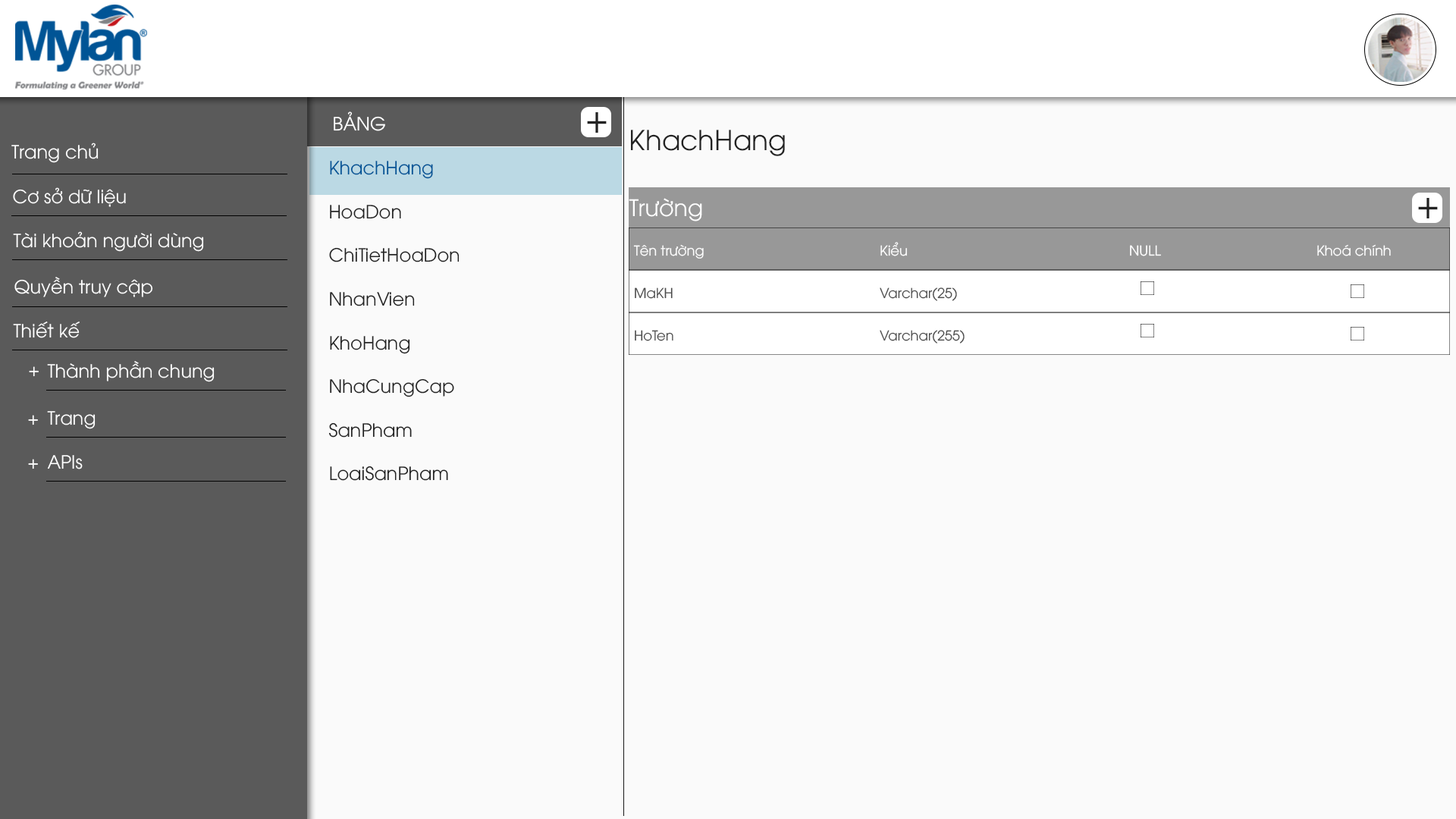
<style>
.page{position:relative;width:1456px;height:819px;background:#fafafa}
.page>*{position:absolute;margin:0}
.t1{font:18.2px "UTM-Avo";color:#ffffff}
.t2{font:40.3px "UTM-Avo";color:#232323;scale:0.93 1}
.t3{font:27.3px "UTM-Avo";color:#232323}
.t4{font:18.2px "UTM-Avo";color:#222222}
.t5{font:18.2px "UTM-Avo";color:#005496}
.t6{font:22.7px "UTM-Avo";color:#ffffff}
.t7{font:13.6px "UTM-Avo";color:#fefefe}
.t8{font:13.6px "UTM-Avo";color:#4b4b4b}
</style>
<div class="page">
<p class="t1" style="left:334px;top:111px;width:51px;height:20px">BẢNG</p>
<p class="t2" style="left:587px;top:112px;width:20px;height:21px">+</p>
<p class="t3" style="left:631px;top:130px;width:154px;height:26px">KhachHang</p>
<p class="t4" style="left:328px;top:161px;width:132px;height:320px"><span class="t5">KhachHang<br></span><br>HoaDon<br><br>ChiTietHoaDon<br><br>NhanVien<br><br>KhoHang<br><br>NhaCungCap<br><br>SanPham<br><br>LoaiSanPham</p>
<p class="t6" style="left:629px;top:198px;width:73px;height:23px">Trường</p>
<p class="t2" style="left:1418px;top:198px;width:20px;height:20px">+</p>
<p class="t7" style="left:633px;top:242px;width:758px;height:17px">Tên trường       Kiểu           NULL             Khoá chính</p>
<p class="t8" style="left:635px;top:287px;width:322px;height:14px">MaKH        Varchar(25)</p>
<p class="t8" style="left:635px;top:330px;width:330px;height:14px">HoTen        Varchar(255)</p>
<p class="t1" style="left:29px;top:366px;width:10px;height:11px">+</p>
<p class="t1" style="left:28px;top:415px;width:10px;height:10px">+</p>
<p class="t1" style="left:28px;top:459px;width:10px;height:10px">+</p>
</div>
